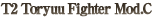
<style>
.page{position:relative;width:157px;height:18px;background:#ffffff}
.page>*{position:absolute;margin:0}
.t1{font:15px "RyuminPro-ExBold";letter-spacing:-0.08em;color:#4a3f32;font-weight:bold;scale:0.9 1}
</style>
<div class="page">
<p class="t1" style="left:0px;top:2px;width:152px;height:15px">T2 Toryuu Fighter Mod.C</p>
</div>
